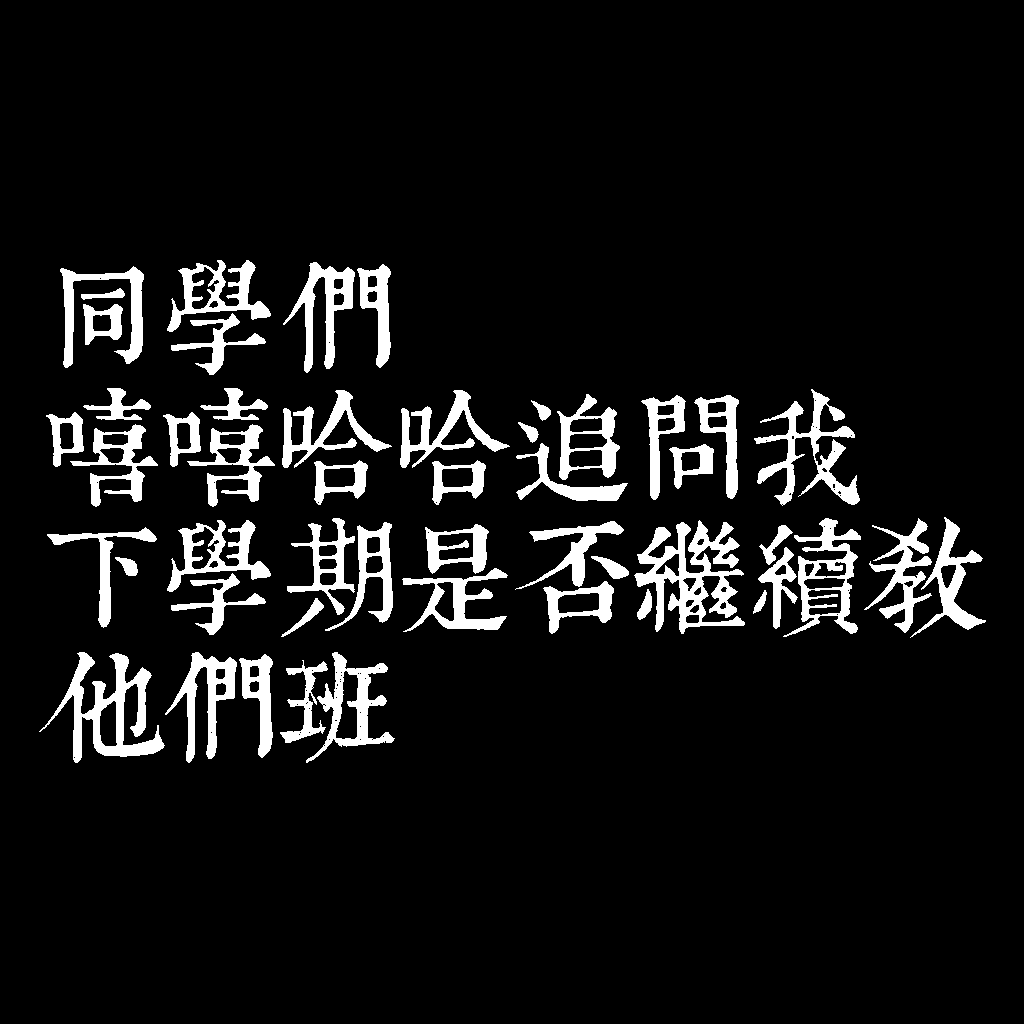
<style>
.page{position:relative;width:1024px;height:1024px;background:#000000}
.page>*{position:absolute;margin:0}
.t1{font:120px/130px "TpldKhangXiDictTrial";letter-spacing:-0.02em;color:#ffffff}
</style>
<div class="page">
<p class="t1" style="left:39px;top:260px;width:947px;height:503px">同學們<br>嘻嘻哈哈追問我<br>下學期是否繼續教<br>他們班</p>
</div>
